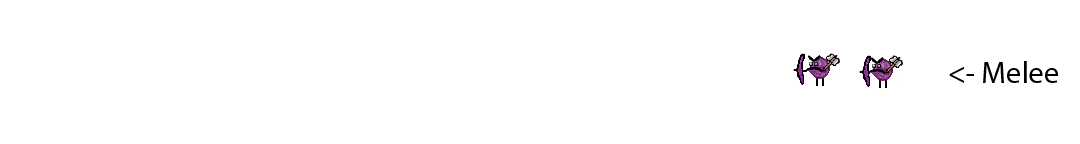
<style>
.page{position:relative;width:1080px;height:144px;background:#ffffff}
.page>*{position:absolute;margin:0}
.t1{font:12px "MyriadPro-Regular";color:#000000}
</style>
<div class="page">
<p class="t1" style="left:949px;top:61px;width:109px;height:22px">&lt;- Melee</p>
</div>
